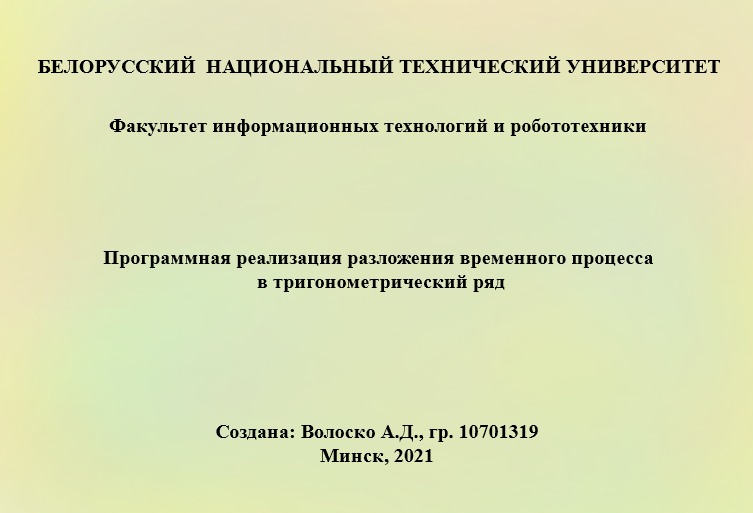
<style>
.page{position:relative;width:753px;height:513px}
.page>*{position:absolute;margin:0}
.t1{font:20px "TimesNewRomanPS-BoldMT";color:#000000}
</style>
<div class="page">
<p class="t1" style="left:38px;top:56px;width:682px;height:21px">БЕЛОРУССКИЙ  НАЦИОНАЛЬНЫЙ ТЕХНИЧЕСКИЙ УНИВЕРСИТЕТ</p>
<p class="t1" style="left:109px;top:118px;width:537px;height:18px">Факультет информационных технологий и робототехники</p>
<p class="t1" style="left:103px;top:251px;width:550px;height:41px;text-align:center">Программная реализация разложения временного процесса <br>в тригонометрический ряд</p>
<p class="t1" style="left:216px;top:425px;width:322px;height:40px;text-align:center">Создана: Волоско А.Д., гр. 10701319<br>Минск, 2021</p>
</div>
